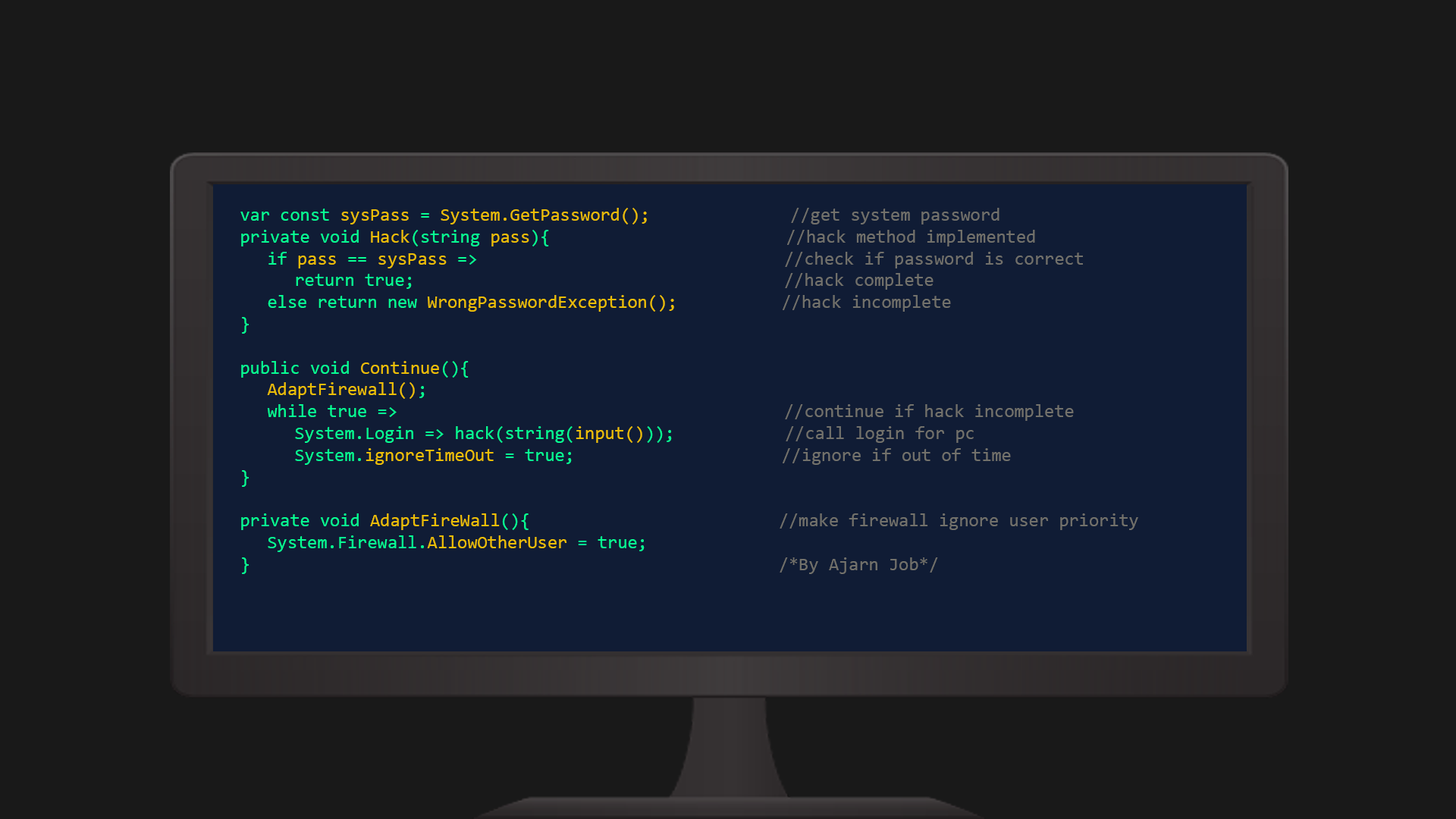
<style>
.page{position:relative;width:1456px;height:819px;background:#191919}
.page>*{position:absolute;margin:0}
.t1{font:18.2px "Consolas";color:#72716b}
.t2{font:18.2px "Consolas";color:#07ff93}
.t3{font:18.2px "Consolas";color:#ecbe06}
</style>
<div class="page">
<p class="t1" style="left:240px;top:208px;width:898px;height:366px"><span class="t2">var const </span><span class="t3">sysPass</span><span class="t2"> = </span><span class="t3">System.GetPassword();              </span>//get system password<br><span class="t2">private void </span><span class="t3">Hack</span><span class="t2">(string </span><span class="t3">pass</span><span class="t2">){            </span>//hack method implemented<br><span class="t2"> if </span><span class="t3">pass</span><span class="t2"> == </span><span class="t3">sysPass</span><span class="t2"> =&gt;                 </span>//check if password is correct<br><span class="t2">  return true;                   </span>//hack complete<br><span class="t2"> else return new </span><span class="t3">WrongPasswordException();       </span>//hack incomplete<br><span class="t2">}<br><br>public void </span><span class="t3">Continue</span><span class="t2">(){<br> </span><span class="t3">AdaptFirewall()</span><span class="t2">;<br> while true =&gt;                    </span>//continue if hack incomplete<br><span class="t2">  System.Login =&gt; hack(string(</span><span class="t3">input()</span><span class="t2">));           </span>//call login for pc<br><span class="t2">  System.</span><span class="t3">ignoreTimeOut </span><span class="t2">= true;           </span>//ignore if out of time<br><span class="t2">}<br><br>private void </span><span class="t3">AdaptFireWall</span><span class="t2">(){           </span>//make firewall ignore user priority<br><span class="t2"> System.Firewall.</span><span class="t3">AllowOtherUser</span><span class="t2"> = true;<br>}                      </span>/*By Ajarn Job*/</p>
</div>
